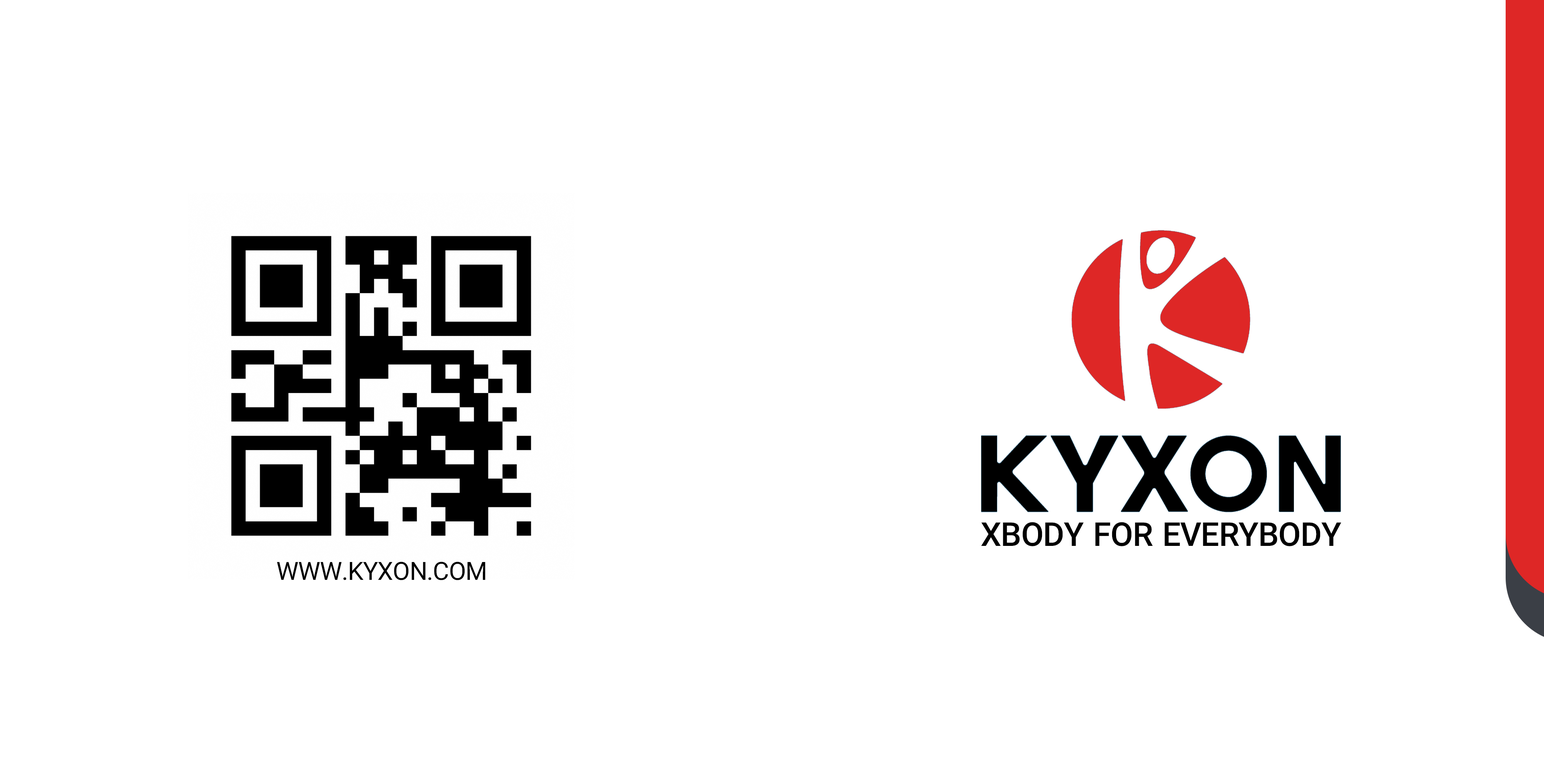
<style>
.page{position:relative;width:1544px;height:772px;background:#ffffff}
.page>*{position:absolute;margin:0}
.t1{font:33px "IRANYekan-Bold";letter-spacing:-0.02em;color:#000000;text-transform:uppercase}
.t2{font:25.1px "IRANYekan";letter-spacing:-0.02em;color:#000000;text-transform:uppercase}
</style>
<div class="page">
<p class="t1" style="left:981px;top:522px;width:360px;height:25px">XBody for everybody</p>
<p class="t2" style="left:277px;top:562px;width:208px;height:19px">www.kyxon.com</p>
</div>
